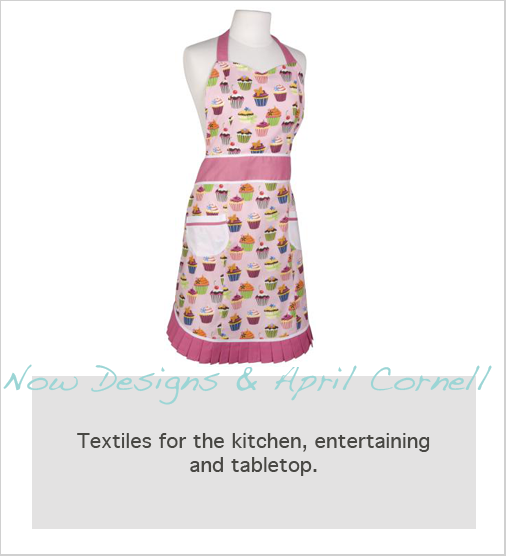
<style>
.page{position:relative;width:506px;height:556px;background:#ffffff}
.page>*{position:absolute;margin:0}
.t1{font:35px "Handwriting-Dakota";color:#9bd5d5}
.t2{font:20px "Geneva";color:#484743}
</style>
<div class="page">
<p class="t1" style="left:3px;top:362px;width:489px;height:43px">Now Designs &amp; April Cornell</p>
<p class="t2" style="left:77px;top:433px;width:353px;height:43px;text-align:center">Textiles for the kitchen, entertaining and tabletop.</p>
</div>
